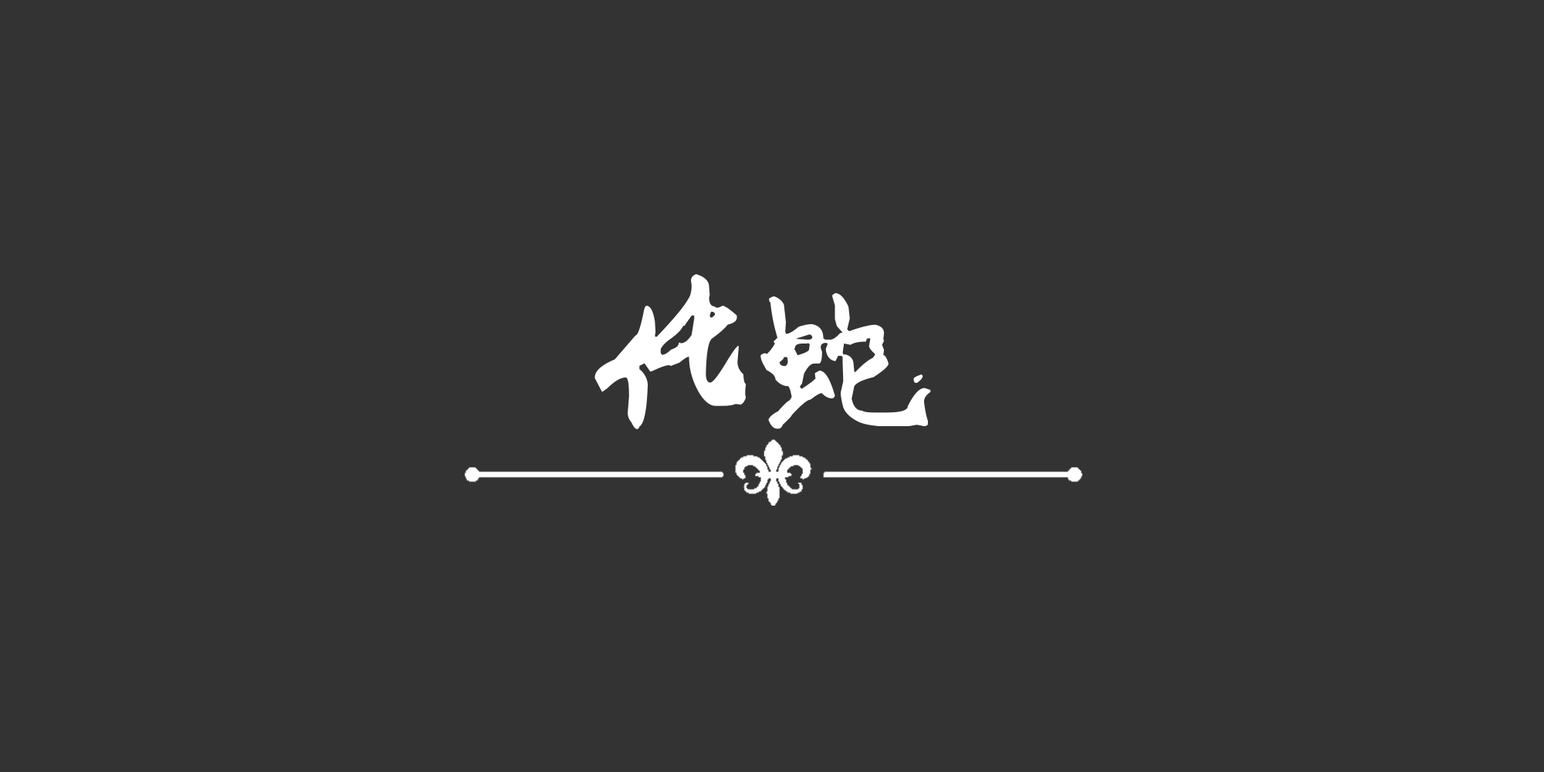
<style>
.page{position:relative;width:1544px;height:772px;background:#333333}
.page>*{position:absolute;margin:0}
.t1{font:165.1px "³¿¹â´ó×Ö";color:#ffffff}
.t2{font:110.1px "³¿¹â´ó×Ö";color:#ffffff}
</style>
<div class="page">
<p class="t1" style="left:595px;top:274px;width:336px;height:155px"><span class="t2"><br></span>  化蛇</p>
</div>
